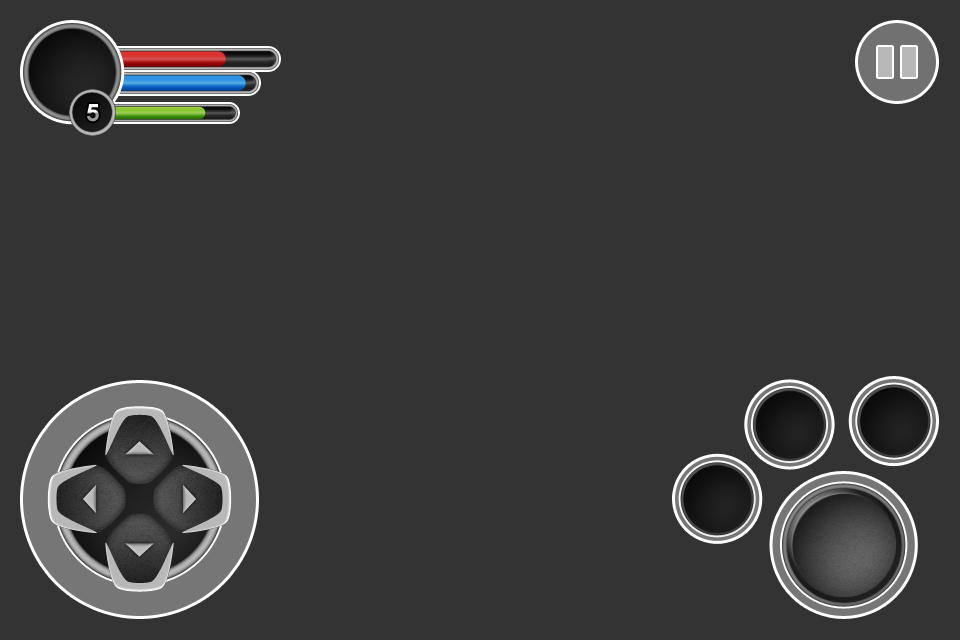
<style>
.page{position:relative;width:960px;height:640px;background:#333333}
.page>*{position:absolute;margin:0}
.t1{font:24px "Arial-BoldMT";letter-spacing:-0.05em}
</style>
<div class="page">
<p class="t1" style="left:87px;top:104px;width:12px;height:18px">5</p>
</div>
